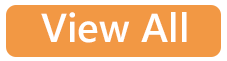
<style>
.page{position:relative;width:227px;height:61px;background:#f29844}
.page>*{position:absolute;margin:0}
.t1{font:40.5px "YuGothicUI-Semibold";color:#ffffff}
</style>
<div class="page">
<p class="t1" style="left:41px;top:12px;width:146px;height:31px">View All</p>
</div>
